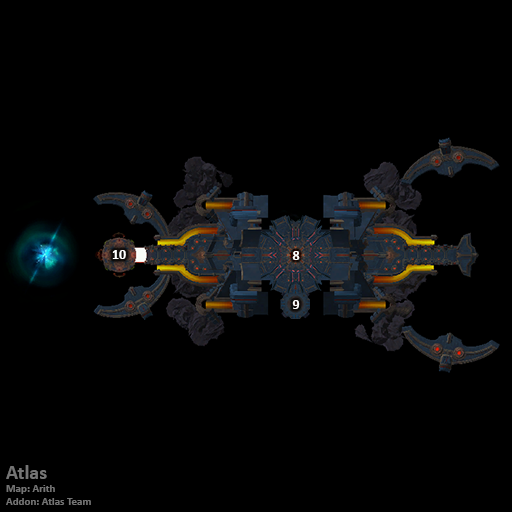
<style>
.page{position:relative;width:512px;height:512px;background:#000000}
.page>*{position:absolute;margin:0}
.t1{font:14px "Calibri-Bold";color:#ffffff}
.t2{font:11px "Calibri-Bold";color:#747474}
.t3{font:20px "Calibri-Bold";color:#747474}
</style>
<div class="page">
<p class="t1" style="left:112px;top:250px;width:14px;height:9px">10</p>
<p class="t1" style="left:292px;top:251px;width:8px;height:9px">8</p>
<p class="t1" style="left:292px;top:300px;width:8px;height:9px">9</p>
<p class="t2" style="left:6px;top:465px;width:85px;height:40px"><span class="t3">Atlas<br></span>Map: Arith<br>Addon: Atlas Team</p>
</div>
